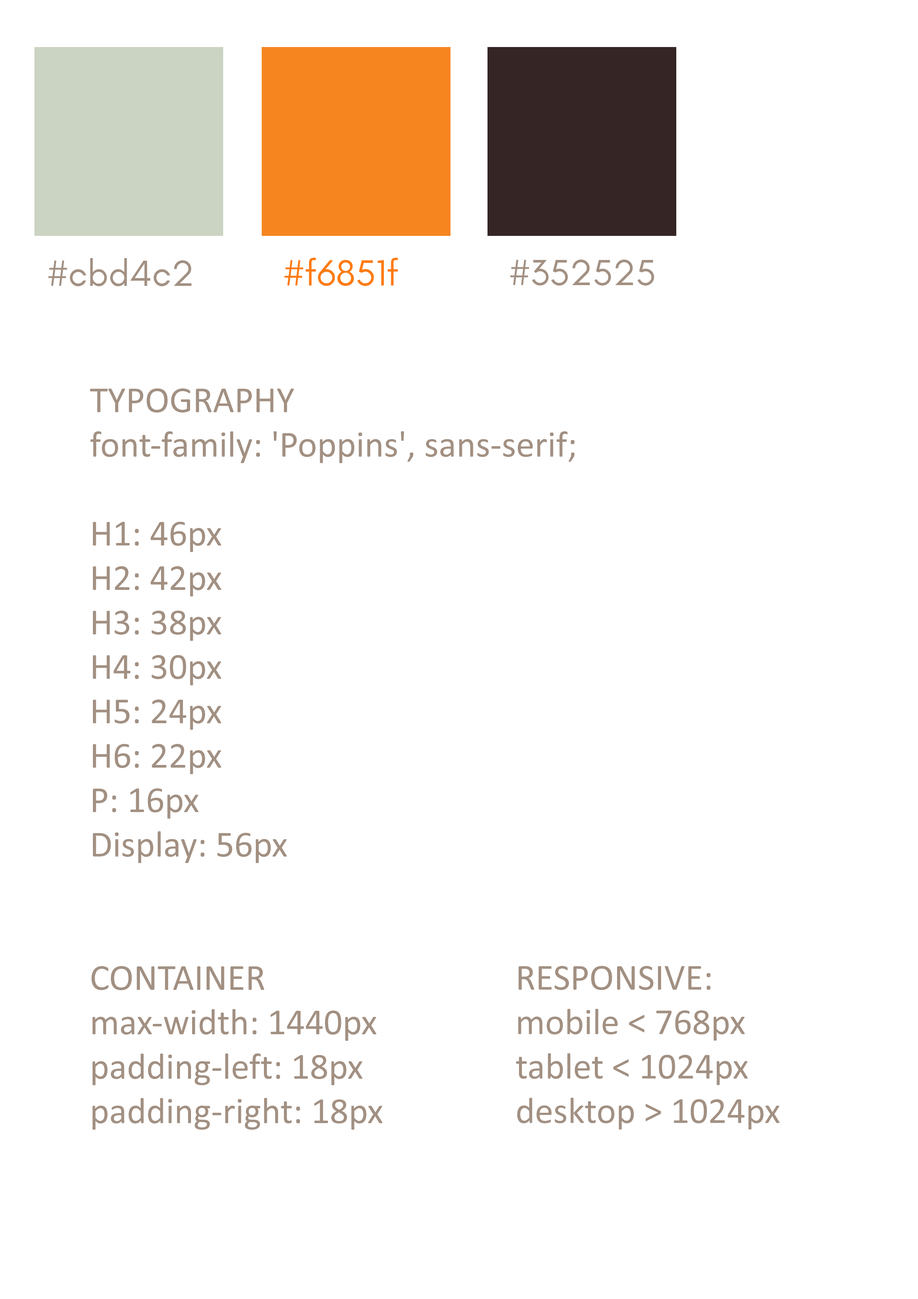
<style>
.page{position:relative;width:918px;height:1299px;background:#ffffff}
.page>*{position:absolute;margin:0}
.t1{font:37px "GlacialIndifference-Regular";color:#ff7b0f}
.t2{font:37px "GlacialIndifference-Regular";color:#a29082}
.t3{font:37px "Calibri";color:#a29082}
</style>
<div class="page">
<p class="t1" style="left:284px;top:258px;width:114px;height:28px">#f6851f</p>
<p class="t2" style="left:48px;top:258px;width:144px;height:28px">#cbd4c2</p>
<p class="t2" style="left:510px;top:260px;width:144px;height:26px">#352525</p>
<p class="t3" style="left:90px;top:388px;width:485px;height:742px">TYPOGRAPHY<br>font-family: 'Poppins', sans-serif;<br><br>H1: 46px<br>H2: 42px<br>H3: 38px<br>H4: 30px<br>H5: 24px<br>H6: 22px<br>P: 16px<br>Display: 56px<br><br><br>CONTAINER<br>max-width: 1440px<br>padding-left: 18px<br>padding-right: 18px</p>
<p class="t3" style="left:516px;top:966px;width:264px;height:164px">RESPONSIVE:<br>mobile &lt; 768px<br>tablet &lt; 1024px<br>desktop &gt; 1024px</p>
</div>
